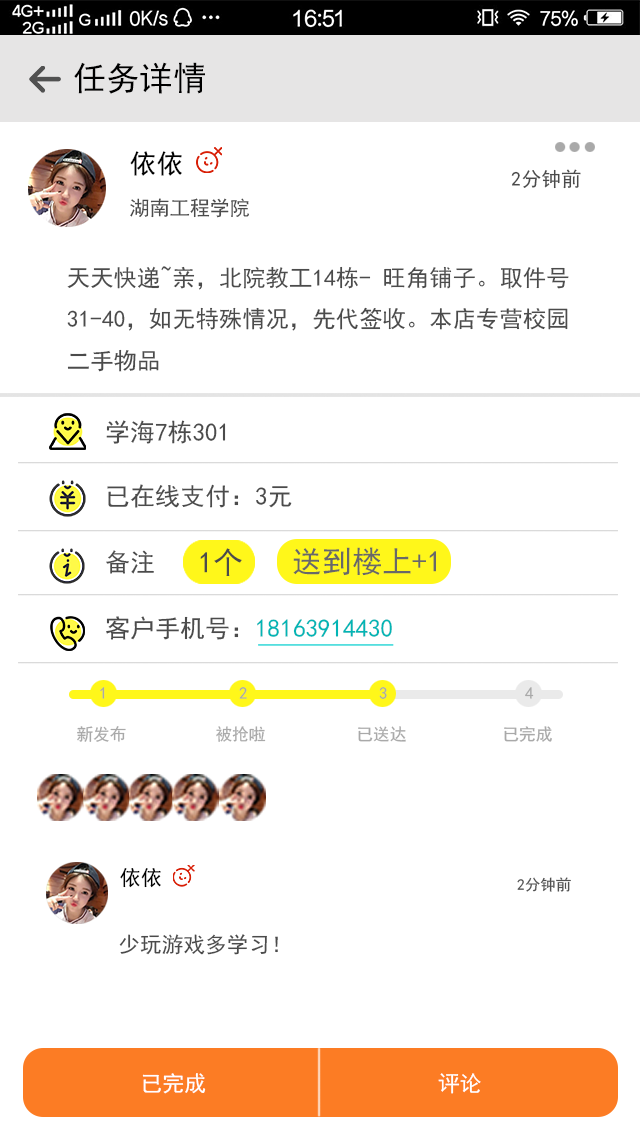
<style>
.page{position:relative;width:640px;height:1136px;background:#ffffff}
.page>*{position:absolute;margin:0}
.t1{font:33.3px "SimHei";letter-spacing:0.002em;color:#000000}
.t2{font:26.7px "SimHei";letter-spacing:0.002em;color:#010101}
.t3{font:12px "SimHei";letter-spacing:0.002em;color:#4b4b4b}
.t4{font:20px "SimHei";letter-spacing:0.002em;color:#4b4b4b}
.t5{font:23.3px/41.5px "SimHei";letter-spacing:0.002em;color:#4b4b4b}
.t6{font:25px "SimHei";letter-spacing:0.002em;color:#4b4b4b}
.t7{font:30px "SimHei";letter-spacing:0.002em;color:#4b4b4b}
.t8{font:30px "SimHei";letter-spacing:0.002em;color:#686868}
.t9{font:25px "SimHei";letter-spacing:0.002em;color:#02b5b5}
.t10{font:16.7px "SimHei";letter-spacing:0.002em;color:#a9a9a9}
.t11{font:21.1px "SimHei";letter-spacing:0.002em;color:#010101}
.t12{font:15.4px "SimHei";letter-spacing:0.002em;color:#515151}
.t13{font:21.5px "SimHei";letter-spacing:0.002em;color:#4b4b4b}
.t14{font:21.7px "SimHei";letter-spacing:0.002em;color:#ffffff}
</style>
<div class="page">
<p class="t1" style="left:74px;top:62px;width:131px;height:32px">任务详情</p>
<p class="t2" style="left:130px;top:151px;width:52px;height:25px">依依</p>
<p class="t3" style="left:511px;top:169px;width:70px;height:20px">2分钟前</p>
<p class="t4" style="left:130px;top:198px;width:119px;height:20px">湖南工程学院</p>
<p class="t5" style="left:67px;top:266px;width:502px;height:106px">天天快递~亲，北院教工14栋- 旺角铺子。取件号<br>31-40，如无特殊情况，先代签收。本店专营校园<br>二手物品</p>
<p class="t6" style="left:106px;top:420px;width:120px;height:24px">学海7栋301</p>
<p class="t6" style="left:107px;top:484px;width:185px;height:24px">已在线支付：3元</p>
<p class="t6" style="left:106px;top:550px;width:48px;height:24px">备注</p>
<p class="t7" style="left:200px;top:548px;width:42px;height:28px">1个</p>
<p class="t8" style="left:293px;top:547px;width:143px;height:29px">送到楼上+1</p>
<p class="t9" style="left:106px;top:616px;width:286px;height:24px"><span class="t6">客户手机号：</span>18163914430</p>
<p class="t10" style="left:100px;top:687px;width:5px;height:12px">1</p>
<p class="t10" style="left:239px;top:687px;width:8px;height:12px">2</p>
<p class="t10" style="left:379px;top:687px;width:8px;height:12px">3</p>
<p class="t10" style="left:525px;top:687px;width:9px;height:12px">4</p>
<p class="t10" style="left:77px;top:726px;width:49px;height:16px">新发布</p>
<p class="t10" style="left:216px;top:726px;width:50px;height:16px">被抢啦</p>
<p class="t10" style="left:358px;top:726px;width:48px;height:16px">已送达</p>
<p class="t10" style="left:504px;top:726px;width:48px;height:16px">已完成</p>
<p class="t11" style="left:120px;top:868px;width:41px;height:20px">依依</p>
<p class="t12" style="left:517px;top:877px;width:54px;height:15px">2分钟前</p>
<p class="t13" style="left:119px;top:934px;width:159px;height:21px">少玩游戏多学习！</p>
<p class="t14" style="left:142px;top:1073px;width:64px;height:21px">已完成</p>
<p class="t14" style="left:438px;top:1073px;width:43px;height:21px">评论</p>
</div>
